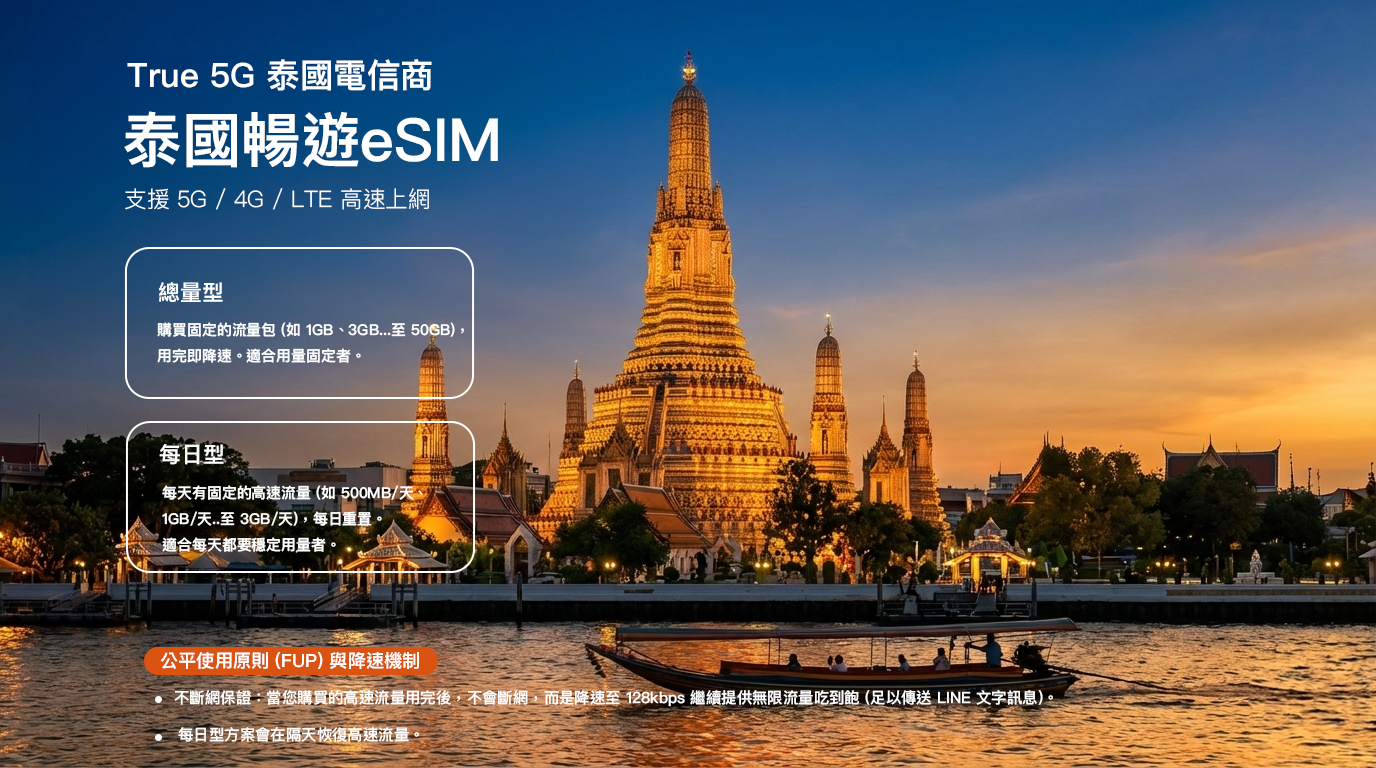
<style>
.page{position:relative;width:1376px;height:768px}
.page>*{position:absolute;margin:0}
.t1{font:33.5px "PingFangTC-Semibold";color:#ffffff}
.t2{font:59.6px "PingFangTC-Semibold";color:#ffffff}
.t3{font:22.7px "PingFangTC-Light";color:#ffffff}
.t4{font:21.7px "PingFangTC-Semibold";color:#ffffff}
.t5{font:14.9px "PingFangTC-Semibold";color:#ffffff}
.t6{font:18.2px "PingFangTC-Semibold";color:#ffffff}
.t7{font:15.4px "PingFangTC-Medium";color:#ffffff}
</style>
<div class="page">
<p class="t1" style="left:127px;top:59px;width:305px;height:32px">True 5G 泰國電信商</p>
<p class="t2" style="left:124px;top:111px;width:374px;height:57px">泰國暢遊eSIM</p>
<p class="t3" style="left:125px;top:188px;width:304px;height:22px">支援 5G / 4G / LTE 高速上網</p>
<p class="t4" style="left:158px;top:282px;width:65px;height:20px">總量型</p>
<p class="t5" style="left:157px;top:322px;width:307px;height:41px">購買固定的流量包 (如 1GB、3GB...至 50GB)，<br>用完即降速。適合用量固定者。</p>
<p class="t4" style="left:159px;top:444px;width:65px;height:21px">每日型</p>
<p class="t5" style="left:162px;top:485px;width:261px;height:67px">每天有固定的高速流量 (如 500MB/天、<br>1GB/天..至 3GB/天)，每日重置。<br>適合每天都要穩定用量者。</p>
<p class="t6" style="left:160px;top:652px;width:259px;height:17px">公平使用原則 (FUP) 與降速機制</p>
<p class="t7" style="left:174px;top:690px;width:879px;height:17px">不斷網保證：當您購買的高速流量用完後，不會斷網，而是降速至 128kbps 繼續提供無限流量吃到飽 (足以傳送 LINE 文字訊息)。</p>
<p class="t7" style="left:178px;top:727px;width:241px;height:15px">每日型方案會在隔天恢復高速流量。</p>
</div>
